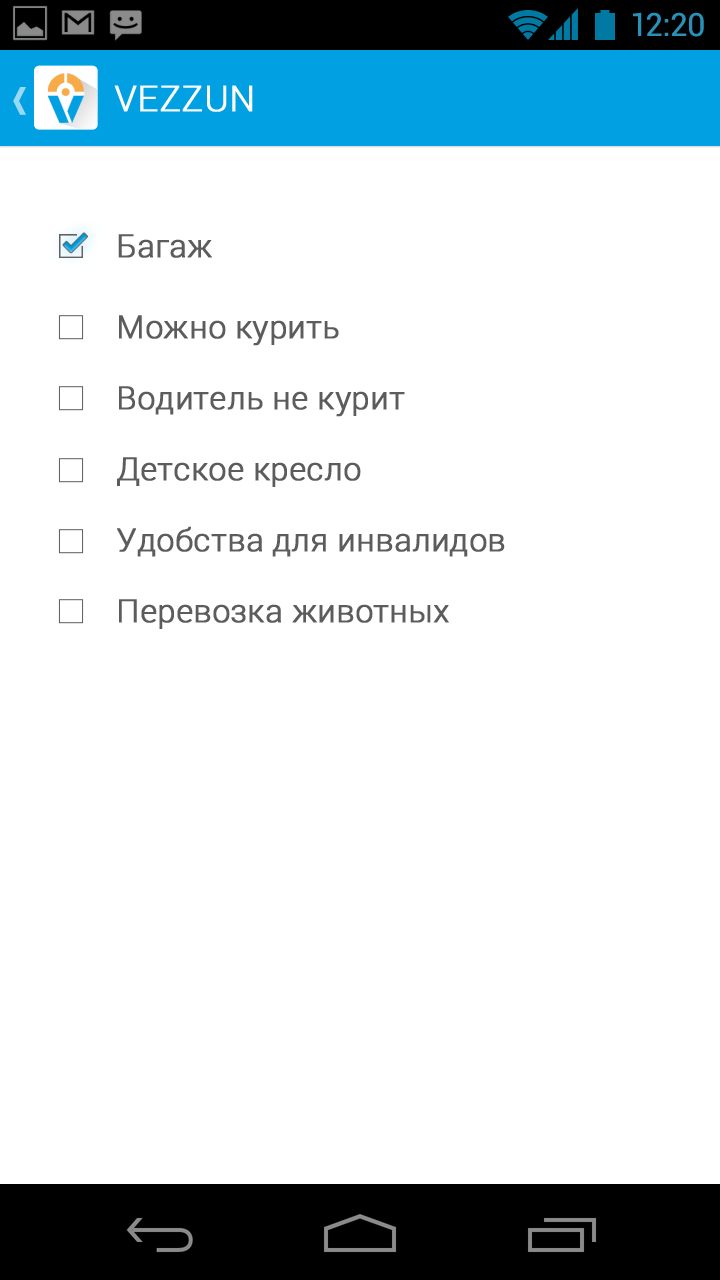
<style>
.page{position:relative;width:720px;height:1280px;background:#ffffff}
.page>*{position:absolute;margin:0}
.t1{font:32px "Roboto-Regular";color:#2991b7}
.t2{font:36px "Roboto-Light";color:#ffffff;text-transform:uppercase;font-weight:bold}
.t3{font:32px "Roboto-Light";color:#5c5c5c;font-weight:bold}
</style>
<div class="page">
<p class="t1" style="left:633px;top:12px;width:71px;height:25px">12:20</p>
<p class="t2" style="left:114px;top:85px;width:139px;height:27px">Vezzun</p>
<p class="t3" style="left:118px;top:234px;width:94px;height:24px">Багаж<br>К</p>
<p class="t3" style="left:119px;top:315px;width:220px;height:31px">Можно курить<br>К</p>
<p class="t3" style="left:119px;top:386px;width:286px;height:31px">Водитель не курит<br>К</p>
<p class="t3" style="left:117px;top:457px;width:244px;height:30px">Детское кресло<br>К</p>
<p class="t3" style="left:117px;top:526px;width:388px;height:31px">Удобства для инвалидов<br>К</p>
<p class="t3" style="left:119px;top:599px;width:330px;height:30px">Перевозка животных<br>К</p>
</div>
